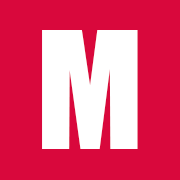
<style>
.page{position:relative;width:180px;height:180px;background:#d9083c}
.page>*{position:absolute;margin:0}
.t1{font:150px "Impact";color:#ffffff}
</style>
<div class="page">
<p class="t1" style="left:42px;top:30px;width:96px;height:119px">M</p>
</div>
